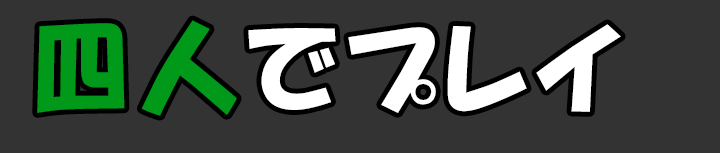
<style>
.page{position:relative;width:720px;height:153px;background:#333333}
.page>*{position:absolute;margin:0}
.t1{font:100px "HGPSoeiKakupoptai";letter-spacing:0.075em;color:#ffffff}
.t2{font:100px "HGPSoeiKakupoptai";letter-spacing:0.075em;color:#00991a}
</style>
<div class="page">
<p class="t1" style="left:37px;top:20px;width:584px;height:96px"><span class="t2">四人</span>でプレイ</p>
</div>
